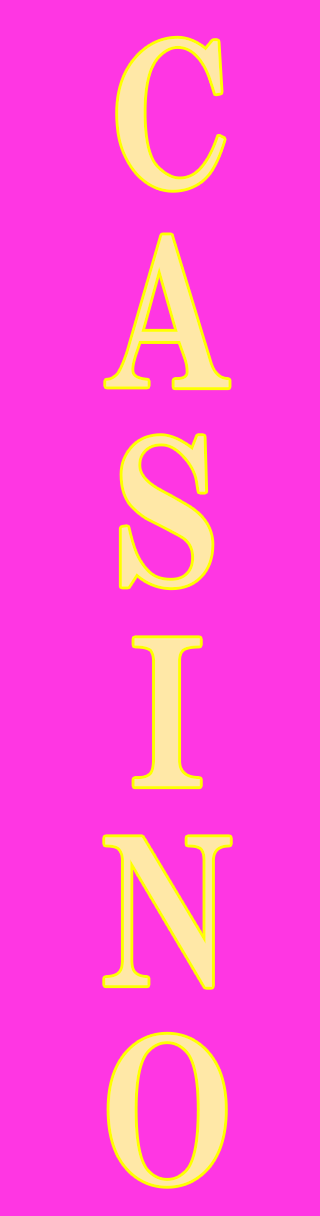
<style>
.page{position:relative;width:320px;height:1216px;background:#ff36e3}
.page>*{position:absolute;margin:0}
.t1{font:199.2px/199.2px "HGSMinchoE";color:#ffe8a7}
</style>
<div class="page">
<p class="t1" style="left:105px;top:38px;width:125px;height:1148px;text-align:center">C<br>A<br>S<br>I<br>N<br>O</p>
</div>
